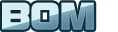
<style>
.page{position:relative;width:118px;height:32px}
.page>*{position:absolute;margin:0}
.t1{font:41.3px "DFSoGeiStd-W9";letter-spacing:-0.03em;font-weight:bold;scale:0.96 1}
</style>
<div class="page">
<p class="t1" style="left:2px;top:2px;width:92px;height:28px">BOM</p>
<p class="t1" style="left:2px;top:2px;width:92px;height:28px">BOM</p>
</div>
